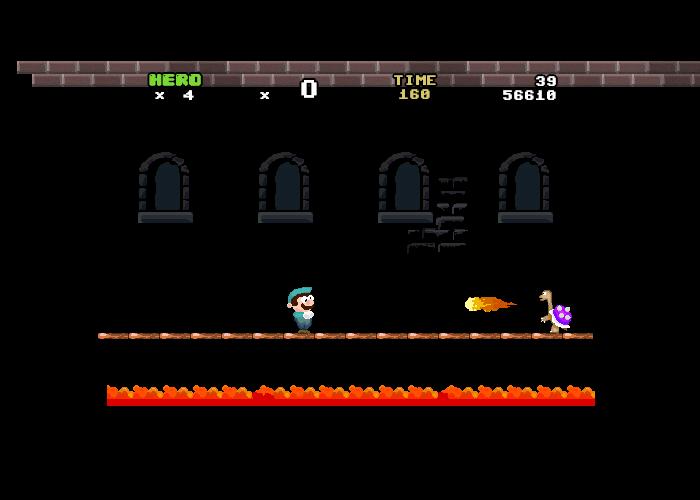
<style>
.page{position:relative;width:700px;height:500px;background:#000000}
.page>*{position:absolute;margin:0}
.t1{font:14px "04b30";color:#7ad736}
.t2{font:14px "Commodore-64-Pixelized";color:#d6c768}
.t3{font:14px "Commodore-64-Pixelized";color:#ffffff}
.t4{font:25.5px "Commodore-64-Pixelized";color:#ffffff}
</style>
<div class="page">
<p class="t1" style="left:149px;top:74px;width:52px;height:12px">HERO</p>
<p class="t2" style="left:394px;top:75px;width:42px;height:10px">TIME</p>
<p class="t3" style="left:536px;top:76px;width:20px;height:10px">39</p>
<p class="t4" style="left:301px;top:80px;width:16px;height:18px">O</p>
<p class="t2" style="left:399px;top:89px;width:31px;height:10px">160</p>
<p class="t3" style="left:155px;top:92px;width:9px;height:7px">x</p>
<p class="t3" style="left:183px;top:90px;width:11px;height:10px">4</p>
<p class="t3" style="left:260px;top:92px;width:9px;height:7px">x</p>
<p class="t3" style="left:503px;top:90px;width:53px;height:10px">56610</p>
</div>
